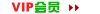
<style>
.page{position:relative;width:100px;height:14px;background:#ffffff}
.page>*{position:absolute;margin:0}
.t1{font:12px "FZZYJW--GB1-0";letter-spacing:0.075em;color:#f62020;font-weight:bold}
.t2{font:12px "FZZYJW--GB1-0";letter-spacing:0.075em;color:#09b405;font-weight:bold}
</style>
<div class="page">
<p class="t1" style="left:11px;top:1px;width:49px;height:12px">VIP<span class="t2">会员</span></p>
</div>
